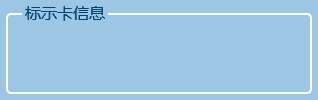
<style>
.page{position:relative;width:318px;height:100px;background:#9dc6e4}
.page>*{position:absolute;margin:0}
.t1{font:16px "MicrosoftYaHeiUI";color:#004475}
</style>
<div class="page">
<p class="t1" style="left:25px;top:6px;width:80px;height:15px">标示卡信息</p>
</div>
